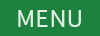
<style>
.page{position:relative;width:100px;height:36px;background:#1d823e}
.page>*{position:absolute;margin:0}
.t1{font:22px "Geneva";letter-spacing:0.075em;color:#e4eae6}
</style>
<div class="page">
<p class="t1" style="left:18px;top:10px;width:63px;height:17px">MENU</p>
</div>
